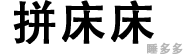
<style>
.page{position:relative;width:190px;height:54px;background:#ffffff}
.page>*{position:absolute;margin:0}
.t1{font:46px "AdobeHeitiStd-Regular";letter-spacing:0.05em;color:#000000;font-weight:bold}
.t2{font:11.7px "AdobeHeitiStd-Regular";letter-spacing:0.05em;color:#b6b6b6;font-weight:bold}
</style>
<div class="page">
<p class="t1" style="left:13px;top:0px;width:141px;height:44px">拼床床</p>
<p class="t2" style="left:147px;top:42px;width:36px;height:13px">睡多多</p>
</div>
